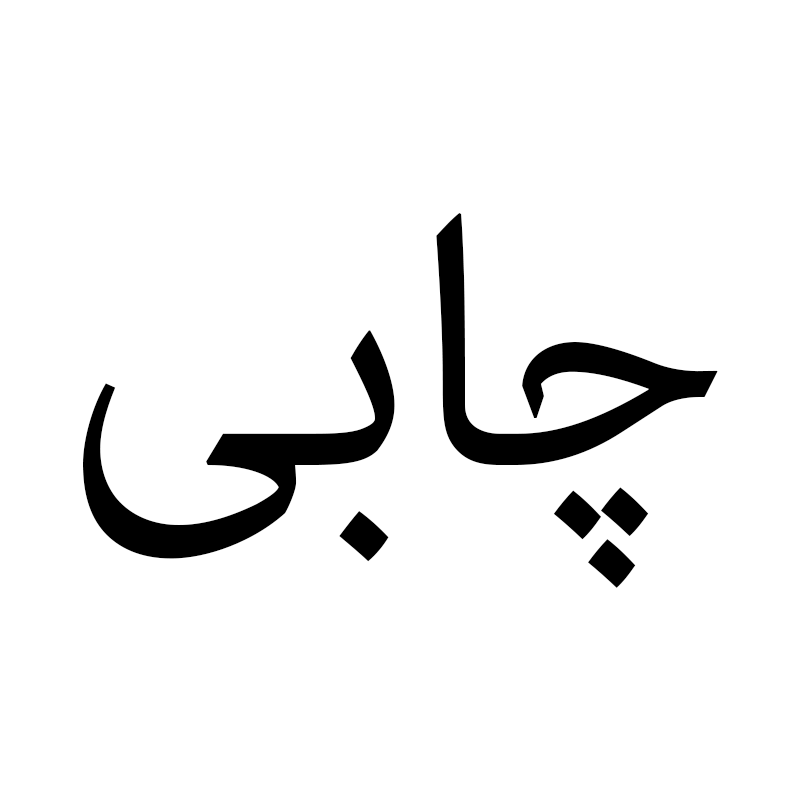
<style>
.page{position:relative;width:800px;height:800px;background:#ffffff}
.page>*{position:absolute;margin:0}
.t1{font:500px "AdobeArabic-Regular";color:#000000}
</style>
<div class="page">
<p class="t1" style="left:83px;top:213px;width:635px;height:375px">چابی</p>
</div>
